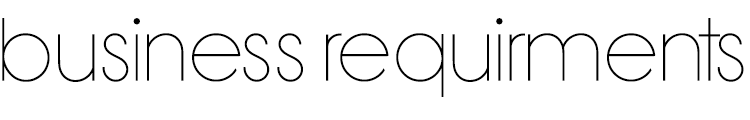
<style>
.page{position:relative;width:750px;height:120px;background:#ffffff}
.page>*{position:absolute;margin:0}
.t1{font:62.5px "BondoluoPeek";color:#000000}
</style>
<div class="page">
<p class="t1" style="left:2px;top:18px;width:742px;height:79px">business requirments</p>
</div>
